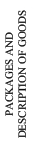
<style>
.page{position:relative;width:35px;height:151px;background:#ffffff}
.page>*{position:absolute;margin:0}
.t1{font:11px "TimesNewRomanPSMT";color:#0c0c0c}
</style>
<div class="page">
<p class="t1" style="left:5px;top:10px;width:22px;height:128px;text-align:center;rotate:-90deg">PACKAGES AND<br>DESCRIPTION OF GOODS</p>
</div>
